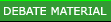
<style>
.page{position:relative;width:111px;height:22px;background:#339933}
.page>*{position:absolute;margin:0}
.t1{font:11px "Verdana";color:#ffffff}
</style>
<div class="page">
<p class="t1" style="left:4px;top:7px;width:103px;height:8px">DEBATE MATERIAL</p>
</div>
